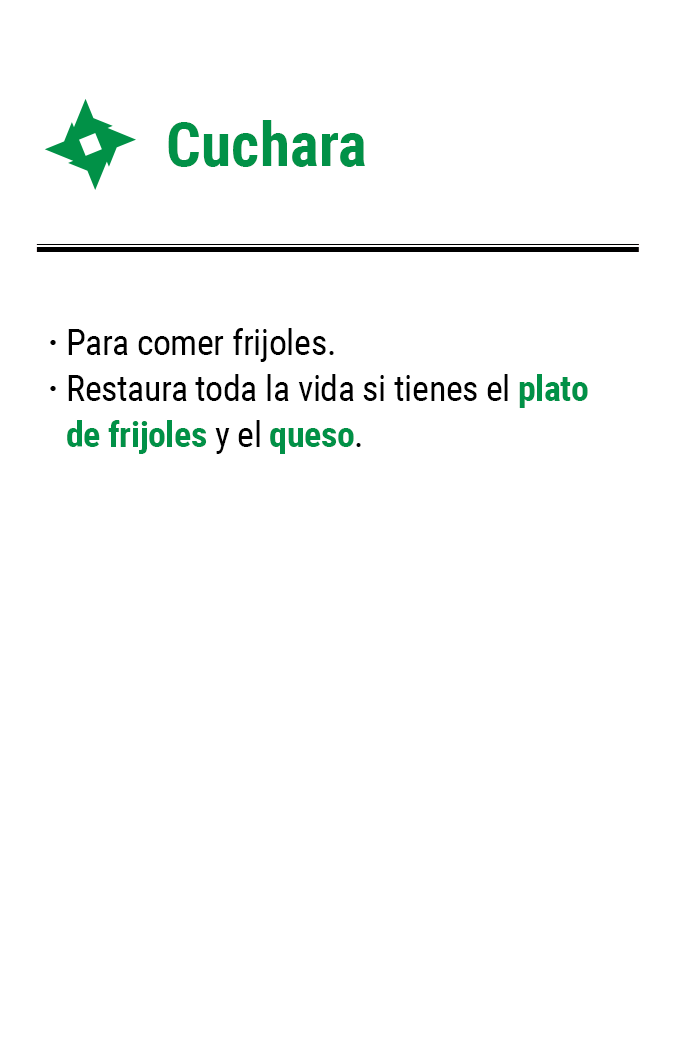
<style>
.page{position:relative;width:675px;height:1050px;background:#ffffff}
.page>*{position:absolute;margin:0}
.t1{font:61.2px "RobotoCondensed-Bold";color:#019147}
.t2{font:35.8px/45.8px "RobotoCondensed-Regular";letter-spacing:-0.01em;color:#000000}
.t3{font:35.8px/45.8px "RobotoCondensed-Bold";letter-spacing:-0.01em;color:#019147}
.t4{font:35.8px/45.8px "RobotoCondensed-Bold";letter-spacing:-0.01em;color:#000000}
</style>
<div class="page">
<p class="t1" style="left:168px;top:120px;width:197px;height:47px">Cuchara</p>
<p class="t2" style="left:67px;top:328px;width:521px;height:126px">Para comer frijoles.<br>Restaura toda la vida si tienes el <span class="t3">plato de frijoles</span> y el <span class="t3">queso</span>.</p>
<p class="t4" style="left:50px;top:340px;width:6px;height:51px">·<br>·</p>
</div>
